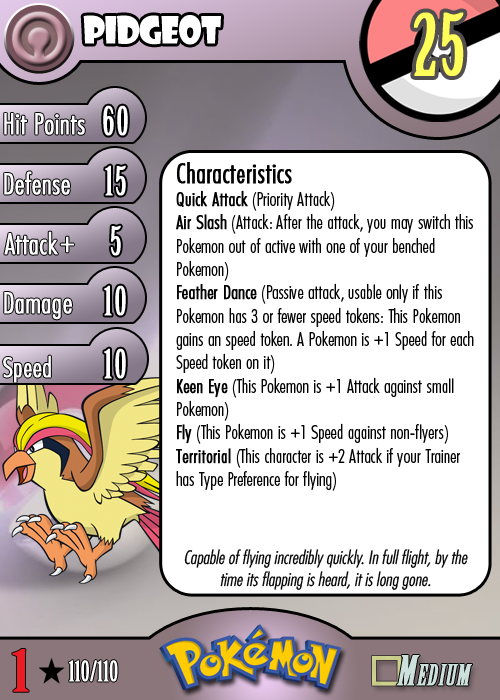
<style>
.page{position:relative;width:500px;height:700px;background:#ffffff}
.page>*{position:absolute;margin:0}
.t1{font:36.7px "ShowcardGothic-Reg";letter-spacing:-0.025em;color:#ffffff;scale:0.91 1}
.t2{font:83.3px "BirchStd";letter-spacing:0.025em;color:#fffd59;font-weight:bold}
.t3{font:27.8px "Futura-CondensedLight";color:#ffffff;font-weight:bold}
.t4{font:38.9px "BirchStd";letter-spacing:0.035em;color:#ffffff;font-weight:bold}
.t5{font:19.4px "FuturaCondensedBQ-Light";color:#010101}
.t6{font:27.8px "FuturaCondensedBQ-Light";color:#010101;font-weight:bold}
.t7{font:19.4px "FuturaCondensedBQ-Light";color:#010101;font-weight:bold}
.t8{font:30.6px "Futura-CondensedLight";color:#ffffff;font-weight:bold}
.t9{font:27.8px "FuturaCondensedBQ-Light";color:#ffffff;font-weight:bold}
.t10{font:18.1px "Futura-CondensedLight";color:#010101;font-style:italic}
.t11{font:55.6px "BirchStd";color:#ed1c24;font-weight:bold;scale:1.5 1}
.t12{font:27.8px "BirchStd";color:#ffffff;font-weight:bold}
</style>
<div class="page">
<p class="t1" style="left:83px;top:15px;width:138px;height:30px">pidgeot</p>
<p class="t2" style="left:414px;top:12px;width:50px;height:64px">25</p>
<p class="t3" style="left:4px;top:113px;width:81px;height:22px">Hit Points</p>
<p class="t4" style="left:103px;top:105px;width:25px;height:31px">60</p>
<p class="t3" style="left:4px;top:171px;width:66px;height:24px">Defense</p>
<p class="t4" style="left:105px;top:165px;width:21px;height:31px">15</p>
<p class="t5" style="left:176px;top:162px;width:298px;height:329px"><span class="t6">Characteristics<br></span><span class="t7">Quick Attack</span> (Priority Attack)<br><span class="t7">Air Slash</span> (Attack: After the attack, you may switch this Pokemon out of active with one of your benched Pokemon)<br><span class="t7">Feather Dance</span> (Passive attack, usable only if this Pokemon has 3 or fewer speed tokens: This Pokemon gains an speed token. A Pokemon is +1 Speed for each Speed token on it)<br><span class="t7">Keen Eye</span> (This Pokemon is +1 Attack against small Pokemon)<br><span class="t7">Fly</span> (This Pokemon is +1 Speed against non-flyers)<br><span class="t7">Territorial</span> (This character is +2 Attack if your Trainer has Type Preference for flying)</p>
<p class="t3" style="left:4px;top:231px;width:54px;height:24px">Attack</p>
<p class="t4" style="left:111px;top:225px;width:10px;height:31px">5</p>
<p class="t8" style="left:60px;top:236px;width:14px;height:17px">+</p>
<p class="t3" style="left:4px;top:292px;width:68px;height:28px">Damage</p>
<p class="t4" style="left:104px;top:285px;width:22px;height:31px">10</p>
<p class="t4" style="left:104px;top:348px;width:22px;height:31px">10</p>
<p class="t9" style="left:3px;top:355px;width:48px;height:28px">Speed</p>
<p class="t10" style="left:184px;top:549px;width:284px;height:41px;text-align:center">Capable of flying incredibly quickly. In full flight, by the time its flapping is heard, it is long gone.</p>
<p class="t11" style="left:12px;top:649px;width:17px;height:43px">1</p>
<p class="t12" style="left:68px;top:660px;width:50px;height:22px">110/110</p>
</div>
